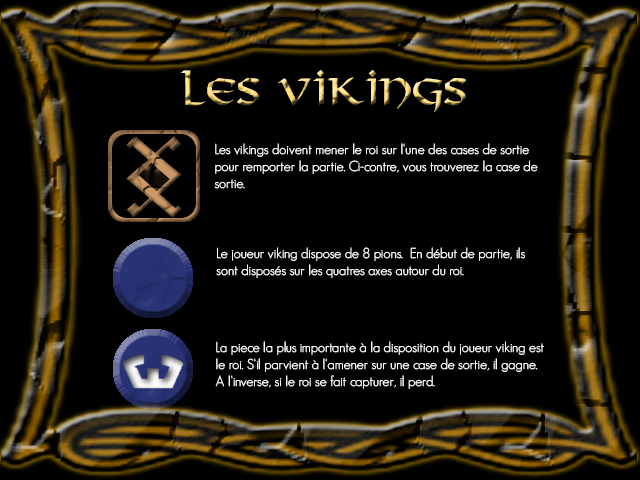
<style>
.page{position:relative;width:640px;height:480px;background:#000000}
.page>*{position:absolute;margin:0}
.t1{font:36px "Viking-Normal"}
.t2{font:14px "GeosansLight";color:#ffffff}
</style>
<div class="page">
<p class="t1" style="left:180px;top:70px;width:286px;height:42px">Les Vikings</p>
<p class="t2" style="left:214px;top:143px;width:324px;height:46px">Les vikings doivent mener le roi sur l‘une des cases de sortie pour remporter la partie. Ci-contre, vous trouverez la case de sortie.</p>
<p class="t2" style="left:216px;top:247px;width:309px;height:31px">Le joueur viking dispose de 8 pions.  En début de partie, ils sont disposés sur les quatres axes autour du roi.</p>
<p class="t2" style="left:215px;top:341px;width:329px;height:48px">La piece la plus importante à la disposition du joueur viking est le roi. S‘il parvient à l‘amener sur une case de sortie, il gagne. A l‘inverse, si le roi se fait capturer, il perd.</p>
</div>
